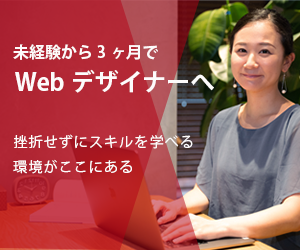
<style>
.page{position:relative;width:300px;height:250px}
.page>*{position:absolute;margin:0}
.t1{font:16px "KozGoPr6N-Bold";color:#fdfbfb}
.t2{font:24px "KozGoPr6N-Bold";color:#fdfbfb}
.t3{font:14px "KozGoPr6N-Regular";letter-spacing:0.08em;color:#fdfbfb}
</style>
<div class="page">
<p class="t1" style="left:13px;top:44px;width:145px;height:16px">未経験から3ヶ月で</p>
<p class="t2" style="left:15px;top:69px;width:199px;height:24px">Webデザイナーへ</p>
<p class="t3" style="left:13px;top:134px;width:180px;height:40px">挫折せずにスキルを学べる<br>環境がここにある</p>
</div>
